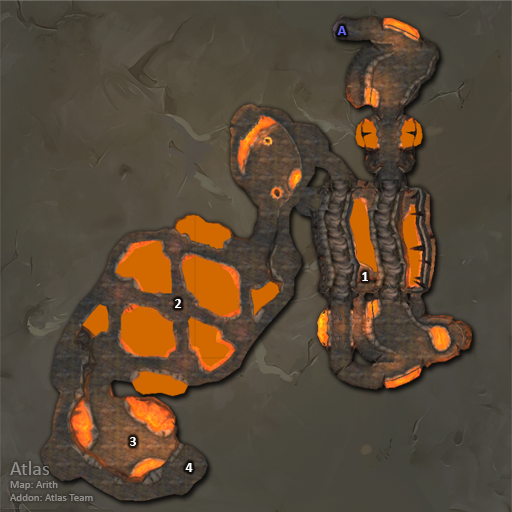
<style>
.page{position:relative;width:512px;height:512px}
.page>*{position:absolute;margin:0}
.t1{font:14px "Calibri-Bold";color:#6666ff}
.t2{font:14px "Calibri-Bold";color:#ffffff}
.t3{font:11px "Calibri";color:#91908d}
.t4{font:20px "Calibri";color:#91908d}
</style>
<div class="page">
<p class="t1" style="left:337px;top:26px;width:9px;height:9px">A</p>
<p class="t2" style="left:362px;top:272px;width:6px;height:9px">1</p>
<p class="t2" style="left:175px;top:299px;width:7px;height:9px">2</p>
<p class="t2" style="left:130px;top:437px;width:6px;height:9px">3</p>
<p class="t3" style="left:10px;top:461px;width:83px;height:40px"><span class="t4">Atlas<br></span>Map: Arith<br>Addon: Atlas Team</p>
<p class="t2" style="left:185px;top:463px;width:8px;height:9px">4</p>
</div>
